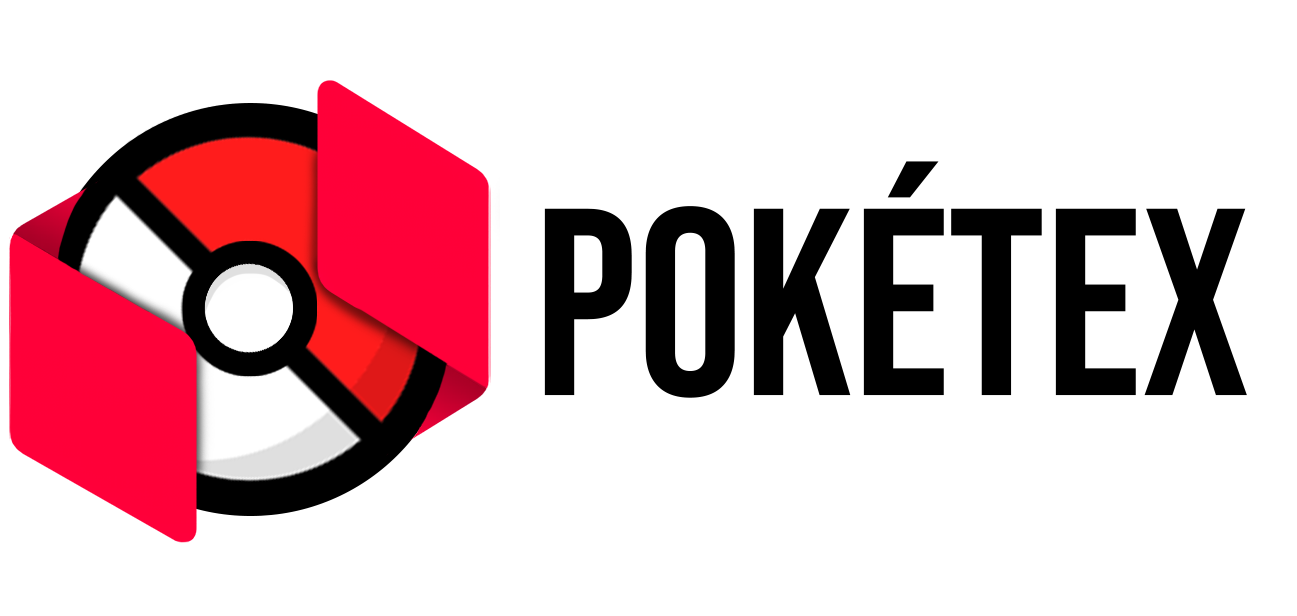
<style>
.page{position:relative;width:1297px;height:616px;background:#ffffff}
.page>*{position:absolute;margin:0}
.t1{font:265.8px "BebasNeuePro-Bold";color:#000000}
</style>
<div class="page">
<p class="t1" style="left:544px;top:161px;width:703px;height:237px">POKÉTEX</p>
</div>
